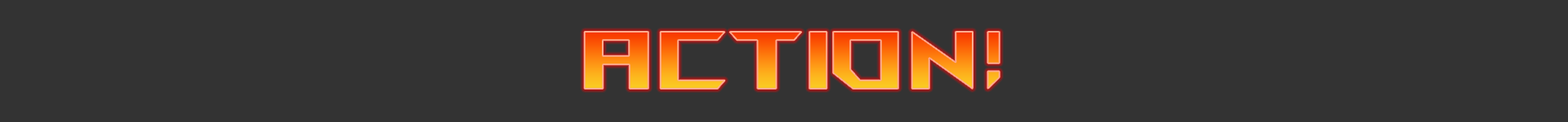
<style>
.page{position:relative;width:1568px;height:122px;background:#333333}
.page>*{position:absolute;margin:0}
.t1{font:81.7px "AniMeMatrix-MB_EN"}
</style>
<div class="page">
<p class="t1" style="left:584px;top:32px;width:416px;height:57px">ACTION!</p>
</div>
